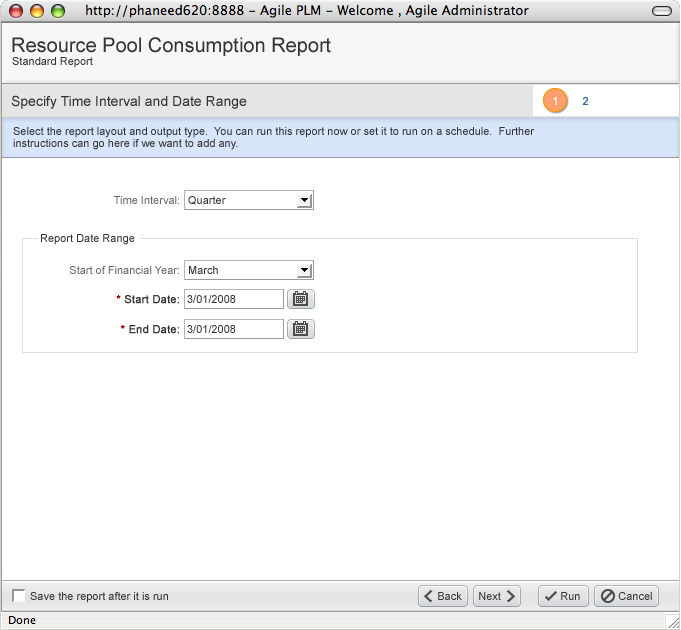
<style>
.page{position:relative;width:681px;height:630px;background:#ffffff}
.page>*{position:absolute;margin:0}
.t1{font:20px "ArialMT";color:#333333}
.t2{font:11px "ArialMT";color:#333333}
.t3{font:14px "ArialMT";color:#333333}
.t4{font:11px "ArialMT";color:#ffffff}
.t5{font:11px "ArialMT";color:#336699}
.t6{font:11px/12px "ArialMT";color:#333333}
.t7{font:11px "ArialMT";color:#666666}
.t8{font:11px "ArialMT";color:#333333;font-weight:bold}
.t9{font:11px "ArialMT";color:#990000;font-weight:bold}
</style>
<div class="page">
<p class="t1" style="left:12px;top:37px;width:319px;height:19px">Resource Pool Consumption Report</p>
<p class="t2" style="left:12px;top:57px;width:81px;height:11px">Standard Report</p>
<p class="t3" style="left:11px;top:95px;width:236px;height:14px">Specify Time Interval and Date Range</p>
<p class="t4" style="left:553px;top:96px;width:4px;height:9px">1</p>
<p class="t5" style="left:582px;top:96px;width:7px;height:9px">2</p>
<p class="t6" style="left:13px;top:127px;width:522px;height:23px">Select the report layout and output type.  You can run this report now or set it to run on a schedule.  Further<br>instructions can go here if we want to add any.</p>
<p class="t7" style="left:114px;top:196px;width:65px;height:8px">Time Interval:</p>
<p class="t2" style="left:188px;top:196px;width:38px;height:9px">Quarter</p>
<p class="t2" style="left:41px;top:234px;width:94px;height:11px">Report Date Range</p>
<p class="t7" style="left:69px;top:266px;width:110px;height:8px">Start of Financial Year:</p>
<p class="t2" style="left:189px;top:266px;width:29px;height:8px">March</p>
<p class="t8" style="left:116px;top:295px;width:63px;height:9px"><span class="t9">*</span> Start Date:</p>
<p class="t2" style="left:187px;top:295px;width:49px;height:8px">3/01/2008</p>
<p class="t8" style="left:120px;top:325px;width:59px;height:9px"><span class="t9">*</span> End Date:</p>
<p class="t2" style="left:187px;top:325px;width:49px;height:8px">3/01/2008</p>
<p class="t2" style="left:30px;top:592px;width:138px;height:11px">Save the report after it is run</p>
<p class="t2" style="left:438px;top:592px;width:24px;height:8px">Back</p>
<p class="t2" style="left:479px;top:592px;width:22px;height:8px">Next</p>
<p class="t2" style="left:561px;top:592px;width:19px;height:8px">Run</p>
<p class="t2" style="left:618px;top:592px;width:34px;height:8px">Cancel</p>
</div>
